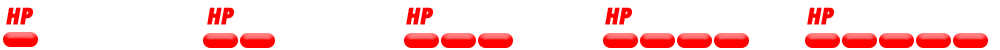
<style>
.page{position:relative;width:1000px;height:50px;background:#ffffff}
.page>*{position:absolute;margin:0}
.t1{font:24.9px "TwCenMT-CondensedExtraBold";letter-spacing:-0.02em;color:#ff0000;text-transform:uppercase;font-weight:bold;font-style:italic}
</style>
<div class="page">
<p class="t1" style="left:6px;top:7px;width:27px;height:18px">hp</p>
<p class="t1" style="left:207px;top:7px;width:27px;height:18px">hp</p>
<p class="t1" style="left:406px;top:7px;width:27px;height:18px">hp</p>
<p class="t1" style="left:605px;top:7px;width:27px;height:18px">hp</p>
<p class="t1" style="left:807px;top:7px;width:27px;height:18px">hp</p>
</div>
